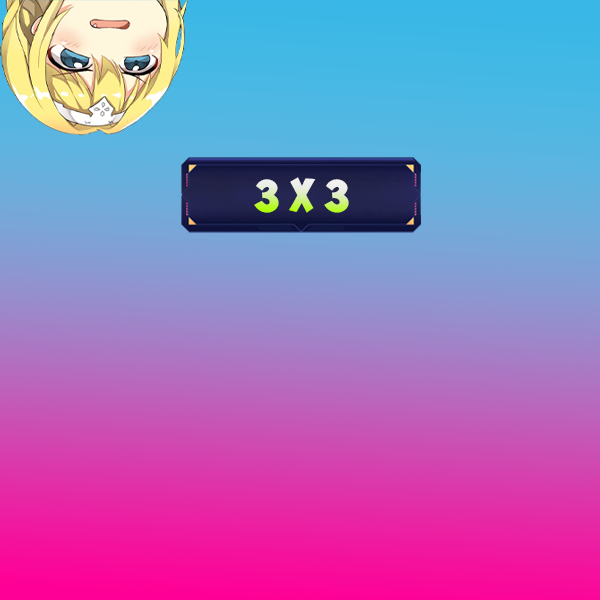
<style>
.page{position:relative;width:600px;height:600px}
.page>*{position:absolute;margin:0}
.t1{font:50.7px "000ObelixProTB"}
</style>
<div class="page">
<p class="t1" style="left:254px;top:177px;width:95px;height:36px">3 x 3</p>
</div>
